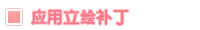
<style>
.page{position:relative;width:200px;height:30px;background:#ffffff}
.page>*{position:absolute;margin:0}
.t1{font:16px "AdobeFanHeitiStd-Bold";color:#f97887;font-weight:bold}
.t2{font:16px "AdobeHeitiStd-Regular";color:#f97887;font-weight:bold}
</style>
<div class="page">
<p class="t1" style="left:31px;top:9px;width:98px;height:17px"><span class="t2">应</span>用立<span class="t2">绘</span>补丁</p>
</div>
